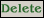
<style>
.page{position:relative;width:44px;height:18px;background:#d4d0c8}
.page>*{position:absolute;margin:0}
.t1{font:16px "JSChusrias";letter-spacing:0.025em;color:#29672b;font-weight:bold}
</style>
<div class="page">
<p class="t1" style="left:1px;top:4px;width:41px;height:9px">Delete</p>
</div>
